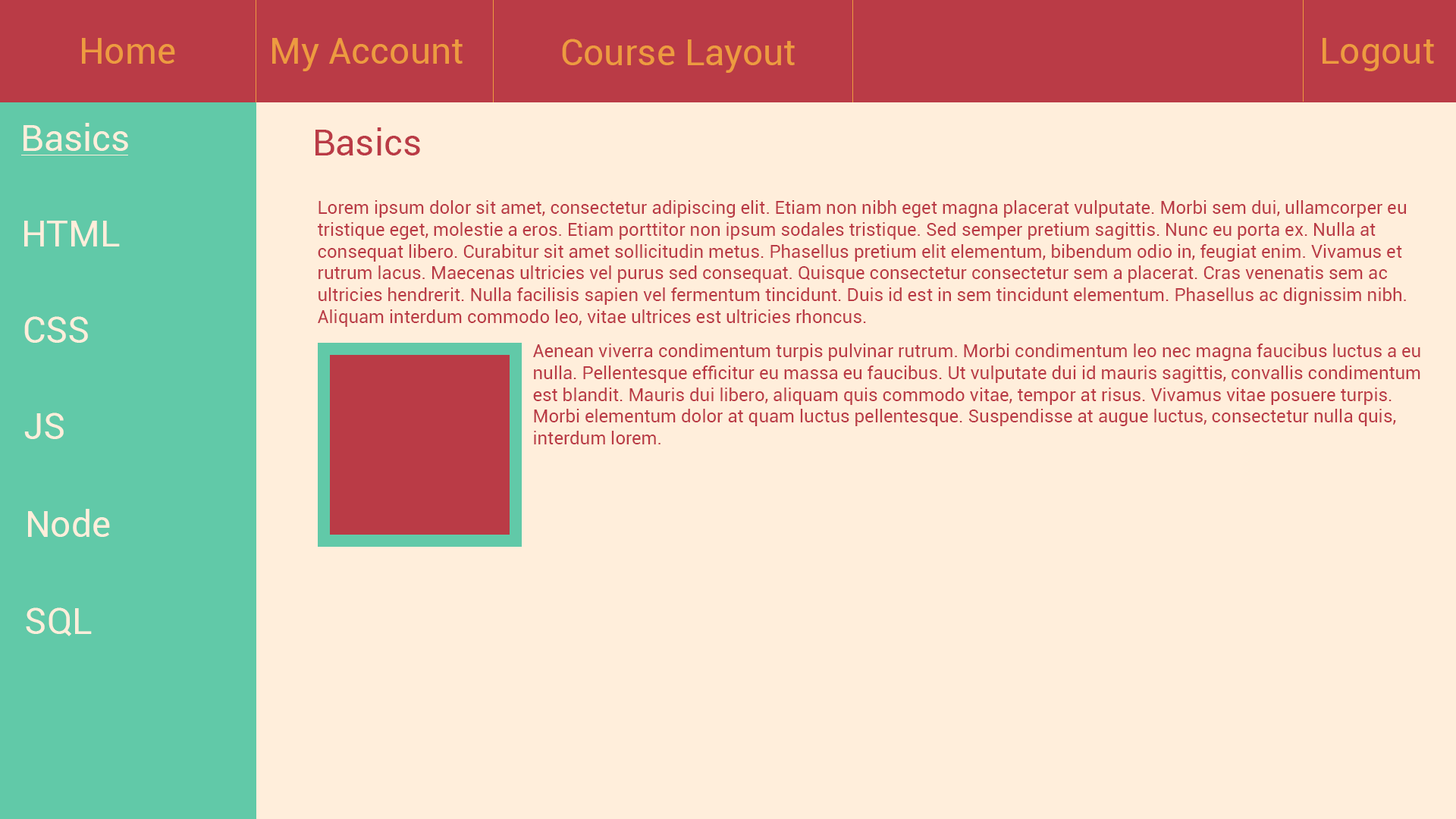
<style>
.page{position:relative;width:1456px;height:819px;background:#ffeedb}
.page>*{position:absolute;margin:0}
.t1{font:36.4px "Roboto-Regular";color:#ed9b40}
.t2{font:36.4px "Roboto-Regular";color:#ffeedb}
.t3{font:36.4px "Roboto-Regular";color:#ba3b46}
.t4{font:18.2px "Roboto-Regular";color:#ba3b46}
</style>
<div class="page">
<p class="t1" style="left:82px;top:38px;width:93px;height:26px">Home</p>
<p class="t1" style="left:272px;top:38px;width:191px;height:33px">My Account</p>
<p class="t1" style="left:562px;top:39px;width:233px;height:34px">Course Layout</p>
<p class="t1" style="left:1323px;top:38px;width:111px;height:33px">Logout</p>
<p class="t2" style="left:24px;top:123px;width:104px;height:28px">Basics</p>
<p class="t3" style="left:315px;top:127px;width:105px;height:28px">Basics</p>
<p class="t4" style="left:318px;top:200px;width:1088px;height:127px">Lorem ipsum dolor sit amet, consectetur adipiscing elit. Etiam non nibh eget magna placerat vulputate. Morbi sem dui, ullamcorper eu <br>tristique eget, molestie a eros. Etiam porttitor non ipsum sodales tristique. Sed semper pretium sagittis. Nunc eu porta ex. Nulla at <br>consequat libero. Curabitur sit amet sollicitudin metus. Phasellus pretium elit elementum, bibendum odio in, feugiat enim. Vivamus et <br>rutrum lacus. Maecenas ultricies vel purus sed consequat. Quisque consectetur consectetur sem a placerat. Cras venenatis sem ac <br>ultricies hendrerit. Nulla facilisis sapien vel fermentum tincidunt. Duis id est in sem tincidunt elementum. Phasellus ac dignissim nibh. <br>Aliquam interdum commodo leo, vitae ultrices est ultricies rhoncus.</p>
<p class="t2" style="left:24px;top:221px;width:96px;height:25px">HTML</p>
<p class="t2" style="left:24px;top:316px;width:64px;height:27px">CSS</p>
<p class="t4" style="left:533px;top:344px;width:887px;height:100px">Aenean viverra condimentum turpis pulvinar rutrum. Morbi condimentum leo nec magna faucibus luctus a eu <br>nulla. Pellentesque efficitur eu massa eu faucibus. Ut vulputate dui id mauris sagittis, convallis condimentum <br>est blandit. Mauris dui libero, aliquam quis commodo vitae, tempor at risus. Vivamus vitae posuere turpis. <br>Morbi elementum dolor at quam luctus pellentesque. Suspendisse at augue luctus, consectetur nulla quis, <br>interdum lorem.</p>
<p class="t2" style="left:24px;top:413px;width:40px;height:26px">JS</p>
<p class="t2" style="left:28px;top:509px;width:82px;height:28px">Node</p>
<p class="t2" style="left:26px;top:607px;width:66px;height:29px">SQL</p>
</div>
